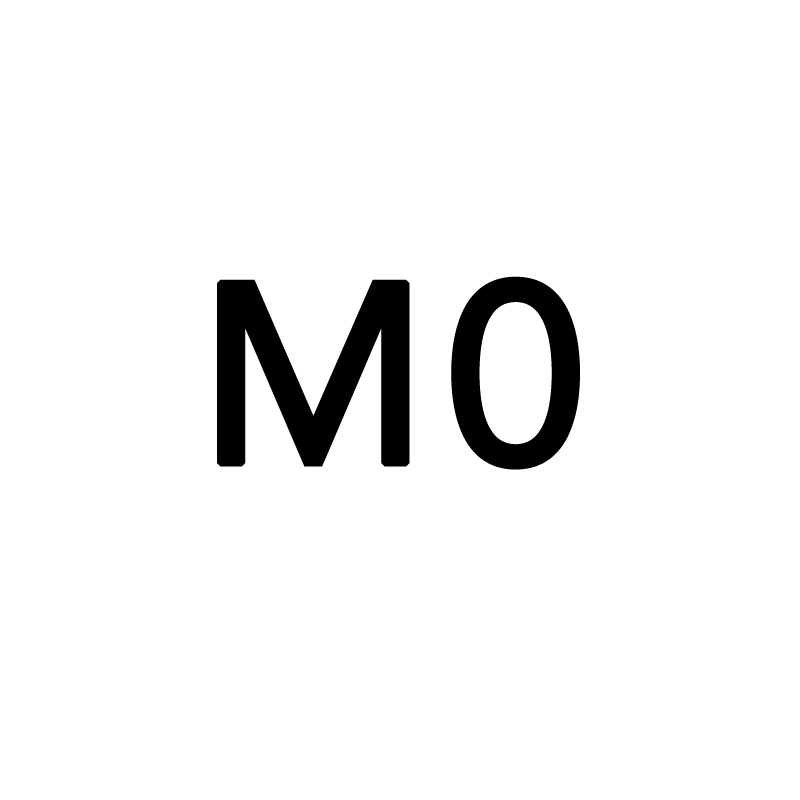
<style>
.page{position:relative;width:800px;height:800px;background:#ffffff}
.page>*{position:absolute;margin:0}
.t1{font:254px "AvenirLTStd-Roman";letter-spacing:0.04em;color:#000000;font-weight:bold}
</style>
<div class="page">
<p class="t1" style="left:217px;top:276px;width:363px;height:194px">M0</p>
</div>
